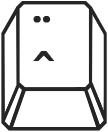
<style>
.page{position:relative;width:108px;height:132px;background:#ffffff}
.page>*{position:absolute;margin:0}
.t1{font:46px/38.7px "AndikaAfr-Regular";color:#252525;font-weight:bold}
</style>
<div class="page">
<p class="t1" style="left:33px;top:16px;width:21px;height:45px">¨<br>^</p>
</div>
